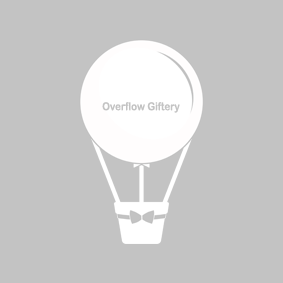
<style>
.page{position:relative;width:283px;height:283px;background:#c3c3c3}
.page>*{position:absolute;margin:0}
.t1{font:11px "ArialRoundedMTBold";color:#c3c3c3;scale:0.89 1}
</style>
<div class="page">
<p class="t1" style="left:102px;top:102px;width:78px;height:11px">Overflow Giftery</p>
</div>
